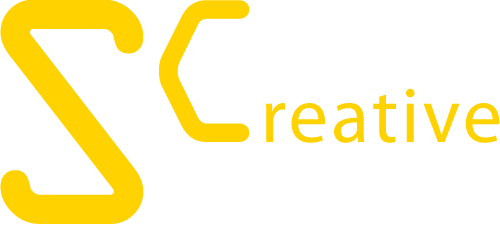
<style>
.page{position:relative;width:500px;height:225px;background:#ffffff}
.page>*{position:absolute;margin:0}
.t1{font:345.5px "OCRAbyBT-Regular";letter-spacing:0.04em;color:#ffd200}
.t2{font:218.3px "OCRAbyBT-Regular";letter-spacing:0.04em;color:#ffd200}
.t3{font:79px "MyriadPro-Regular";letter-spacing:0.04em;color:#ffd200}
.t4{font:230.4px "OCRAbyBT-Regular";letter-spacing:0.04em;color:#ffd200}
</style>
<div class="page">
<p class="t1" style="left:0px;top:0px;width:144px;height:224px">S</p>
<p class="t2" style="left:159px;top:0px;width:91px;height:142px">C</p>
<p class="t3" style="left:266px;top:88px;width:234px;height:55px"><span class="t4"> </span>reative</p>
</div>
